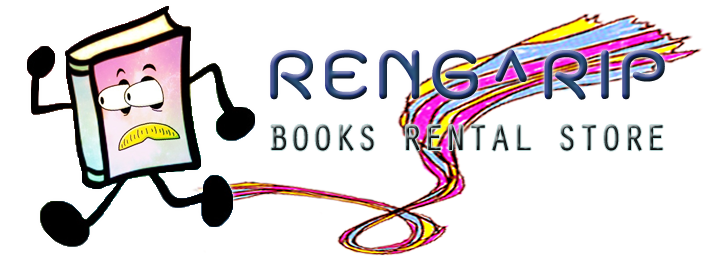
<style>
.page{position:relative;width:709px;height:268px;background:#ffffff}
.page>*{position:absolute;margin:0}
.t1{font:100px "THKodchasal-Bold"}
.t2{font:37px "OratorStd"}
</style>
<div class="page">
<p class="t1" style="left:270px;top:49px;width:395px;height:51px">R E N G ^ R I P</p>
<p class="t2" style="left:271px;top:124px;width:392px;height:27px">BOOKS RENTAL STORE</p>
</div>
